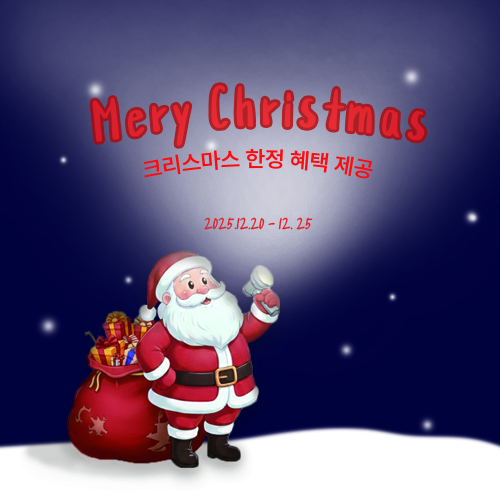
<style>
.page{position:relative;width:500px;height:500px}
.page>*{position:absolute;margin:0}
.t1{font:77px "Cafe24Behappy";letter-spacing:0.12em;color:#e42630;scale:0.79 1}
.t2{font:22px "Pretendard-SemiBold";color:#ff0a0e}
.t3{font:16.6px "Ownglyph_the_sea_breeze-Rg";color:#e0232e;scale:0.77 1}
</style>
<div class="page">
<p class="t1" style="left:92px;top:85px;width:333px;height:61px">Mery Christmas</p>
<p class="t2" style="left:143px;top:148px;width:230px;height:31px">크리스마스 한정 혜택 제공</p>
<p class="t3" style="left:204px;top:217px;width:109px;height:13px">2025.12.20 - 12. 25</p>
</div>
